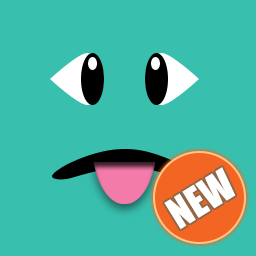
<style>
.page{position:relative;width:256px;height:256px;background:#38bfae}
.page>*{position:absolute;margin:0}
.t1{font:39.2px "Impact";color:#ffffff}
</style>
<div class="page">
<p class="t1" style="left:164px;top:167px;width:72px;height:63px;rotate:-32deg">NEW</p>
</div>
